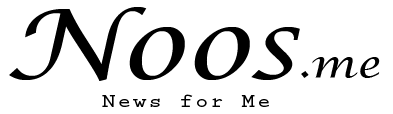
<style>
.page{position:relative;width:393px;height:114px;background:#ffffff}
.page>*{position:absolute;margin:0}
.t1{font:97px "LucidaCalligraphy-Italic";color:#000000;scale:1.14 1}
.t2{font:38.8px "LucidaCalligraphy-Italic";color:#000000;scale:1.14 1}
.t3{font:19.4px "PrestigeEliteStd-Bd";letter-spacing:0.1em;color:#000000;scale:1.14 1}
</style>
<div class="page">
<p class="t1" style="left:9px;top:7px;width:291px;height:74px">Noos</p>
<p class="t2" style="left:301px;top:57px;width:79px;height:21px">.me</p>
<p class="t3" style="left:102px;top:94px;width:167px;height:13px">News for Me</p>
</div>
